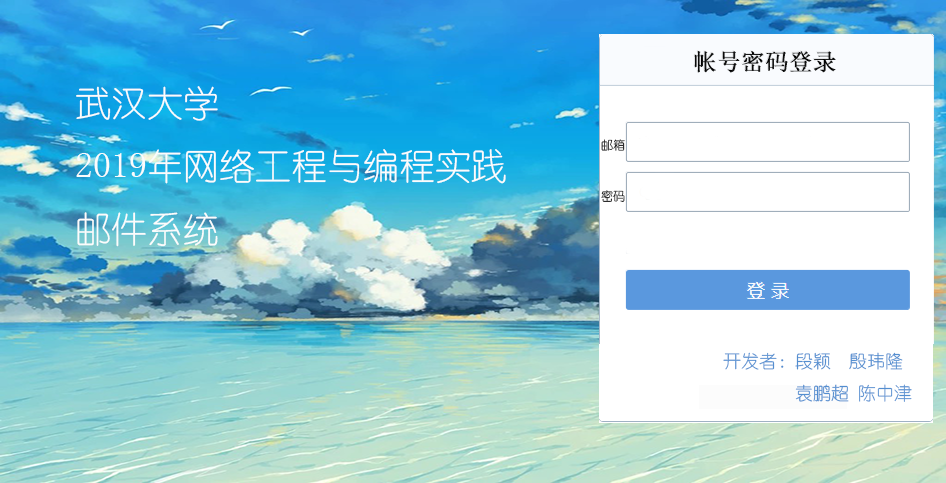
<style>
.page{position:relative;width:946px;height:483px;background:#ffffff}
.page>*{position:absolute;margin:0}
.t1{font:36px "YouYuan";color:#fcfcfc}
.t2{font:12px "YouYuan"}
.t3{font:18px "YouYuan";color:#538ed0}
</style>
<div class="page">
<p class="t1" style="left:76px;top:86px;width:430px;height:161px">武汉大学<br>2019年网络工程与编程实践<br>邮件系统</p>
<p class="t2" style="left:601px;top:139px;width:24px;height:12px">邮箱</p>
<p class="t2" style="left:601px;top:190px;width:24px;height:12px">密码</p>
<p class="t3" style="left:723px;top:352px;width:189px;height:50px">开发者：段颖  殷玮隆<br>  袁鹏超 陈中津</p>
</div>
